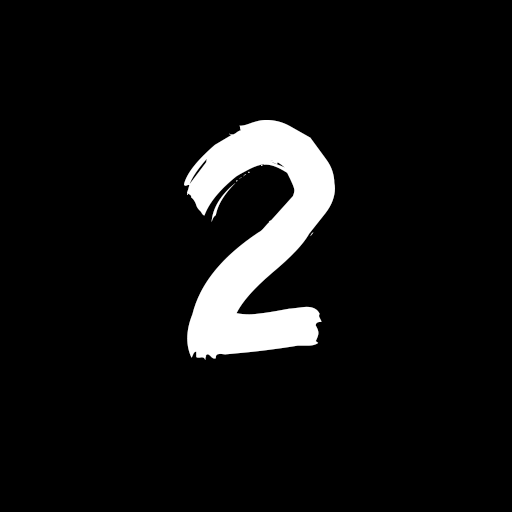
<style>
.page{position:relative;width:512px;height:512px;background:#000000}
.page>*{position:absolute;margin:0}
.t1{font:300px "appopaint-Regular";color:#ffffff}
</style>
<div class="page">
<p class="t1" style="left:184px;top:120px;width:151px;height:240px">2</p>
</div>
